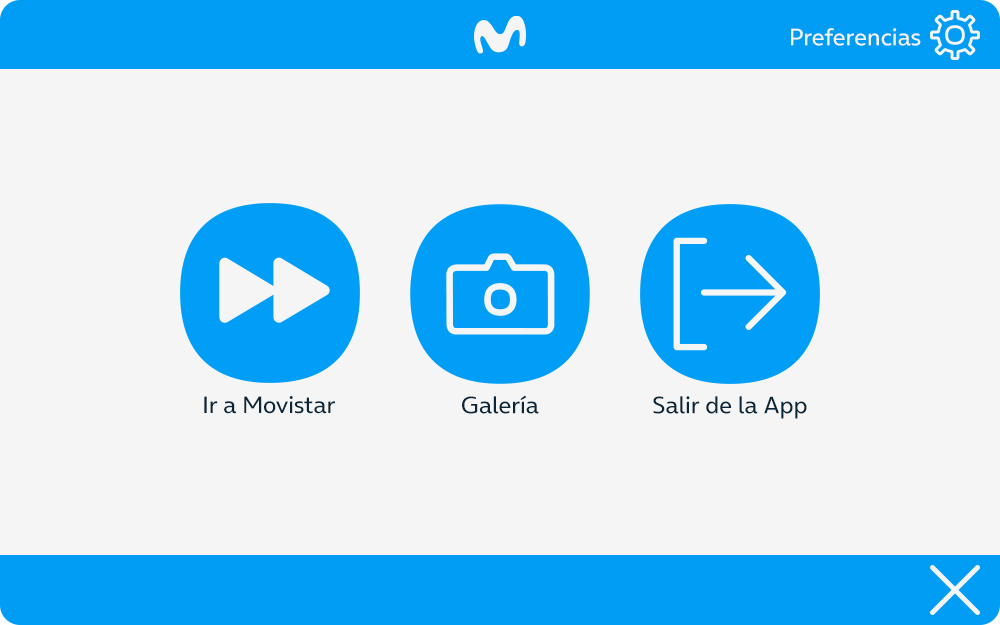
<style>
.page{position:relative;width:1000px;height:625px;background:#f5f5f5}
.page>*{position:absolute;margin:0}
.t1{font:24px "OnAir-Regular";color:#f5f5f5}
.t2{font:24px "OnAir-Regular";color:#0a2739}
</style>
<div class="page">
<p class="t1" style="left:791px;top:28px;width:130px;height:18px">Preferencias</p>
<p class="t2" style="left:204px;top:396px;width:131px;height:18px">Ir a Movistar</p>
<p class="t2" style="left:462px;top:395px;width:77px;height:19px">Galería</p>
<p class="t2" style="left:653px;top:396px;width:154px;height:23px">Salir de la App</p>
</div>
